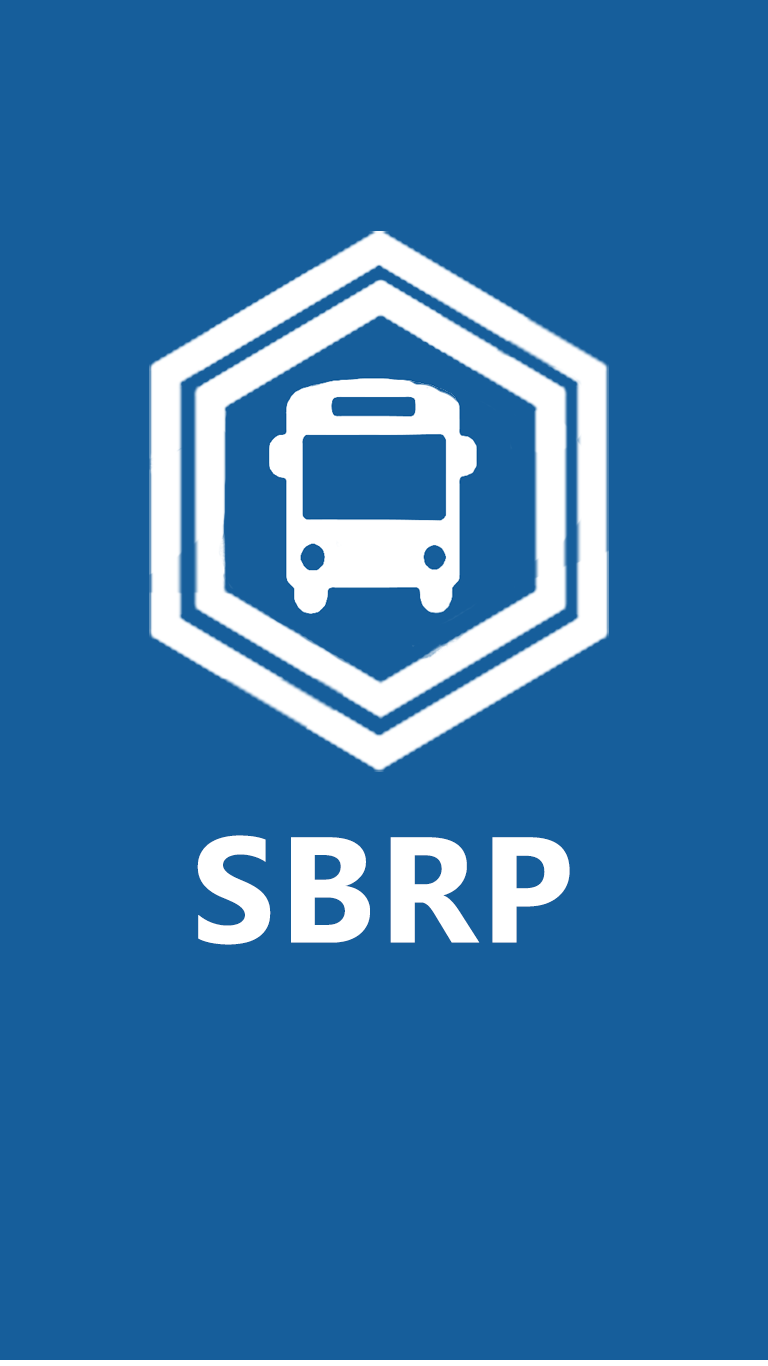
<style>
.page{position:relative;width:768px;height:1366px;background:#165e9b}
.page>*{position:absolute;margin:0}
.t1{font:150px "LeelawadeeUI-Bold";letter-spacing:0.025em;color:#ffffff}
</style>
<div class="page">
<p class="t1" style="left:197px;top:835px;width:373px;height:110px">SBRP</p>
</div>
